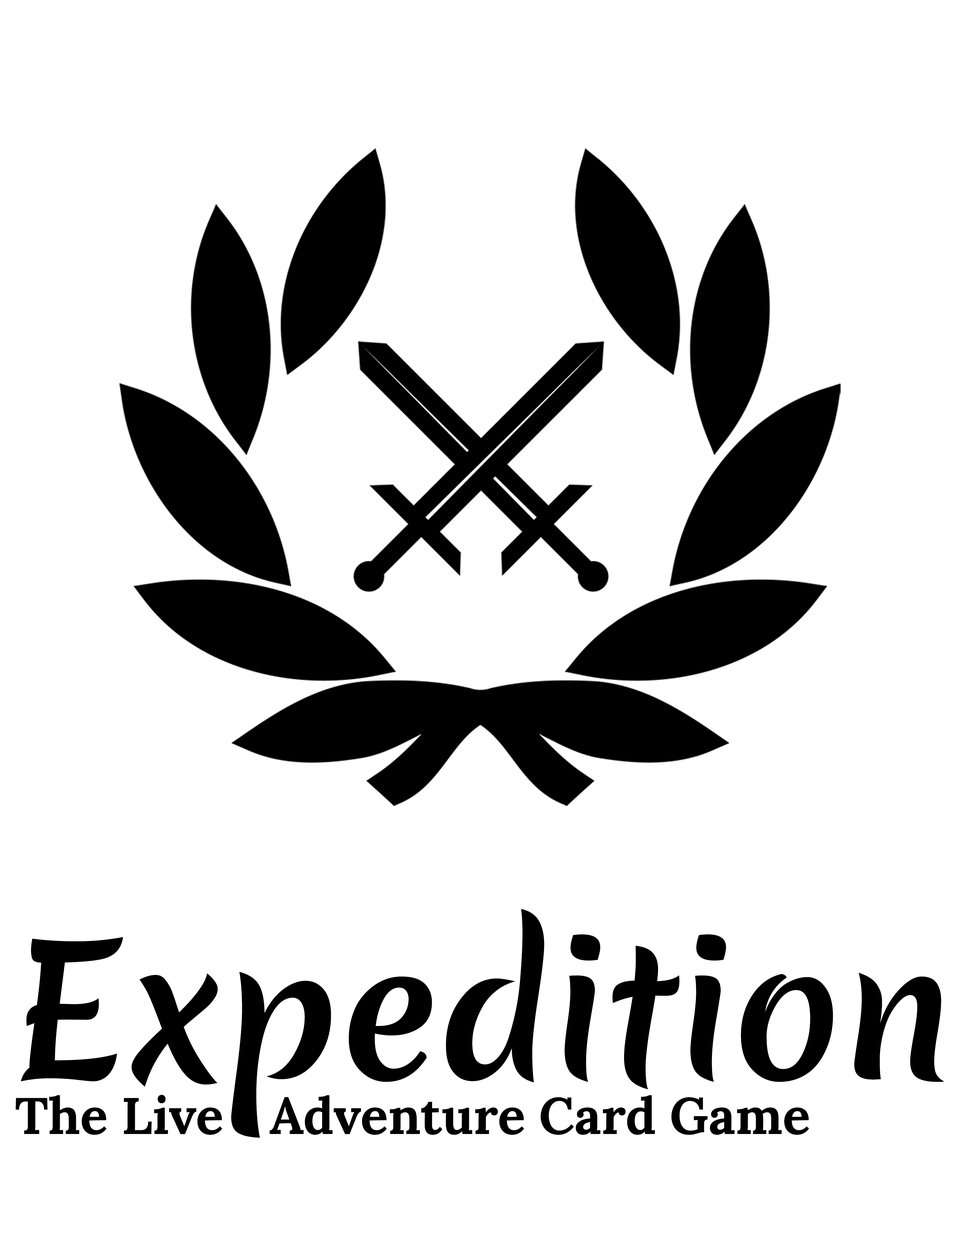
<style>
.page{position:relative;width:960px;height:1242px;background:#ffffff}
.page>*{position:absolute;margin:0}
.t1{font:178px "MeriendaOne-Regular";color:#000000}
.t2{font:51.4px "Lora-Bold";color:#000000}
</style>
<div class="page">
<p class="t1" style="left:21px;top:909px;width:923px;height:229px">Expedition</p>
<p class="t2" style="left:16px;top:1095px;width:793px;height:40px">The Live   Adventure Card Game</p>
</div>
